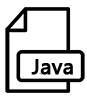
<style>
.page{position:relative;width:87px;height:100px;background:#ffffff}
.page>*{position:absolute;margin:0}
.t1{font:20px "MicrosoftYaHeiUI";color:#000000;font-weight:bold}
</style>
<div class="page">
<p class="t1" style="left:31px;top:59px;width:42px;height:16px">Java</p>
</div>
